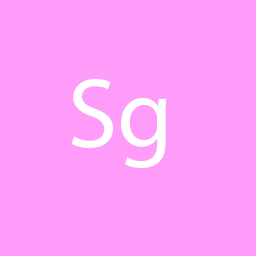
<style>
.page{position:relative;width:256px;height:256px;background:#ff9bf9}
.page>*{position:absolute;margin:0}
.t1{font:100px "MyriadPro-Regular";color:#ffffff}
</style>
<div class="page">
<p class="t1" style="left:71px;top:79px;width:96px;height:89px">Sg</p>
</div>
